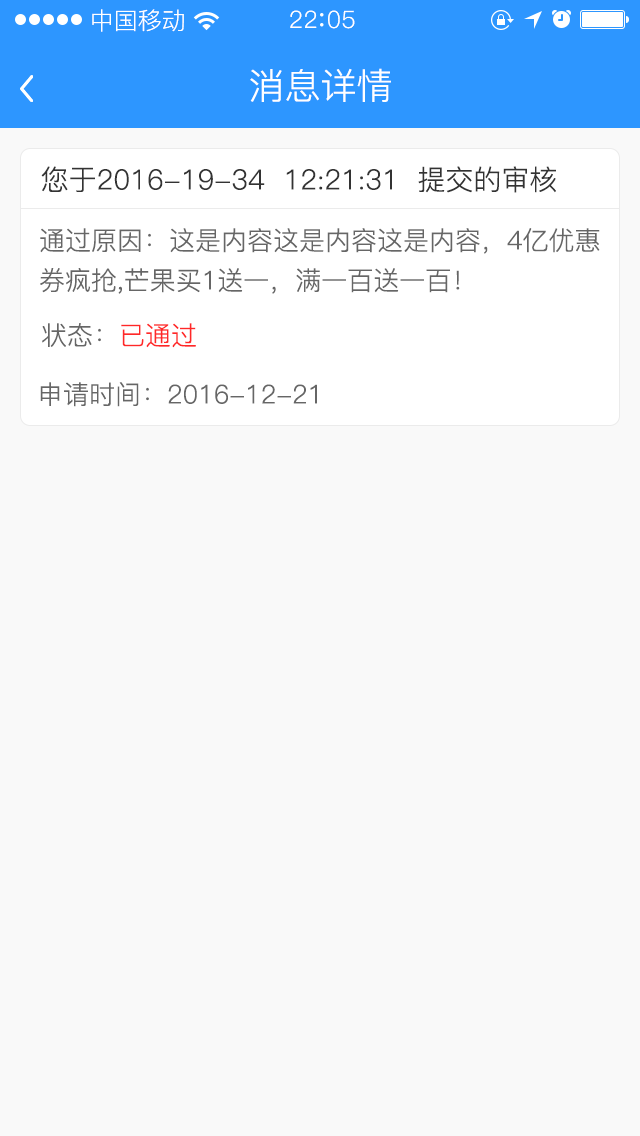
<style>
.page{position:relative;width:640px;height:1136px;background:#f9f9f9}
.page>*{position:absolute;margin:0}
.t1{font:24px "PingFang-SC-Regular";color:#ffffff}
.t2{font:24px "PingFang-SC-Regular";letter-spacing:0.03em;color:#ffffff}
.t3{font:36px "PingFang-SC-Regular";color:#ffffff}
.t4{font:28px "PingFang-SC-Regular";color:#333333}
.t5{font:26px/40px "PingFang-SC-Regular";color:#666666}
.t6{font:26px "PingFang-SC-Regular";color:#666666}
.t7{font:26px "PingFang-SC-Regular";color:#ff2828}
</style>
<div class="page">
<p class="t1" style="left:92px;top:9px;width:92px;height:23px">中国移动</p>
<p class="t2" style="left:290px;top:10px;width:65px;height:19px">22 05</p>
<p class="t3" style="left:250px;top:68px;width:141px;height:34px">消息详情</p>
<p class="t4" style="left:41px;top:166px;width:515px;height:27px">您于2016-19-34  12:21:31  提交的审核</p>
<p class="t5" style="left:40px;top:228px;width:560px;height:66px">通过原因：这是内容这是内容这是内容，4亿优惠<br>券疯抢,芒果买1送一，满一百送一百！</p>
<p class="t6" style="left:42px;top:323px;width:154px;height:25px">状态：<span class="t7">已通过</span></p>
<p class="t6" style="left:40px;top:382px;width:277px;height:25px">申请时间：2016-12-21</p>
</div>
